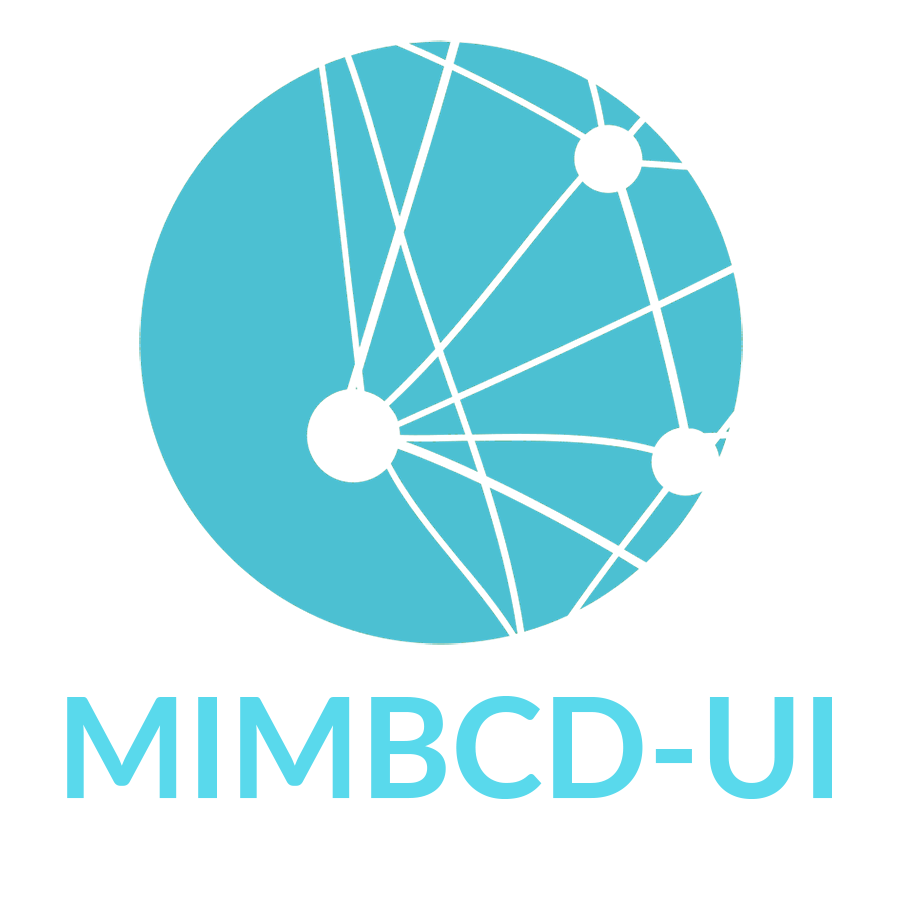
<style>
.page{position:relative;width:900px;height:900px;background:#ffffff}
.page>*{position:absolute;margin:0}
.t1{font:138.6px "Lato-Bold";color:#59d9ec}
</style>
<div class="page">
<p class="t1" style="left:67px;top:696px;width:765px;height:103px">MIMBCD-UI</p>
</div>
